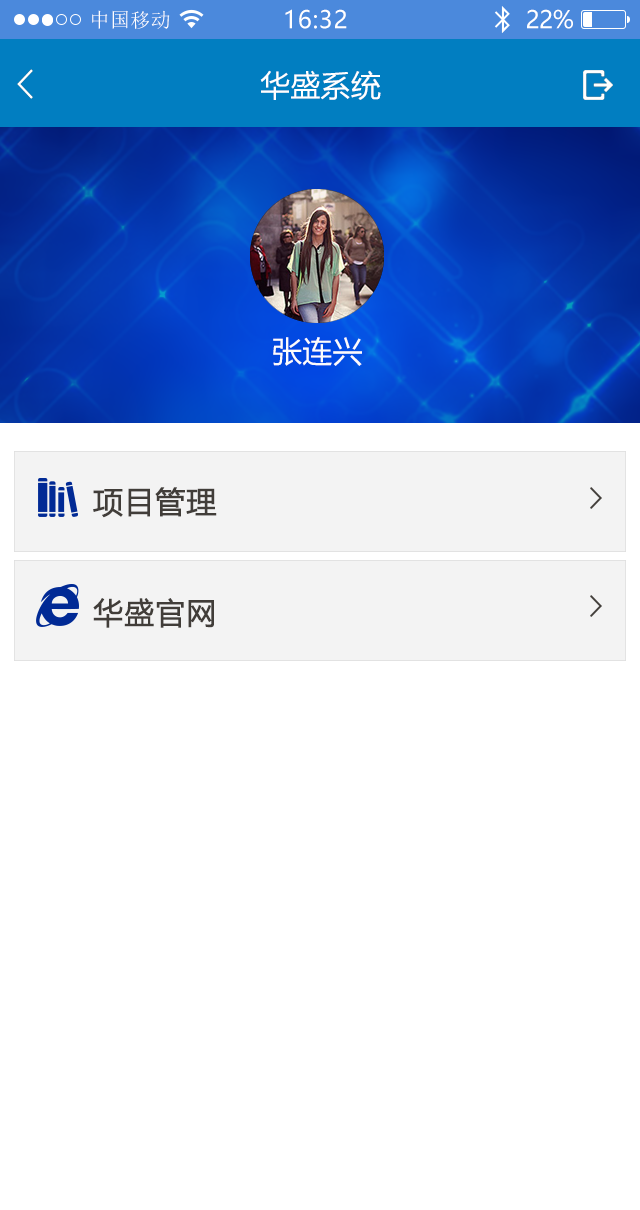
<style>
.page{position:relative;width:640px;height:1210px;background:#ffffff}
.page>*{position:absolute;margin:0}
.t1{font:20px "SimSun";letter-spacing:0.02em;color:#ffffff}
.t2{font:24px "MicrosoftYaHei";letter-spacing:0.025em;color:#ffffff}
.t3{font:24px "MicrosoftYaHei";letter-spacing:-0.02em;color:#ffffff}
.t4{font:30px "MicrosoftYaHei";letter-spacing:0.01em;color:#ffffff}
.t5{font:30px "MicrosoftYaHei";letter-spacing:0.01em;color:#fcfcfc}
.t6{font:30px "MicrosoftYaHei";letter-spacing:0.01em;color:#413d39;font-weight:bold}
</style>
<div class="page">
<p class="t1" style="left:92px;top:10px;width:78px;height:19px">中国移动</p>
<p class="t2" style="left:285px;top:9px;width:62px;height:20px">16:32</p>
<p class="t3" style="left:527px;top:9px;width:46px;height:20px">22%</p>
<p class="t4" style="left:260px;top:70px;width:121px;height:30px">华盛系统</p>
<p class="t5" style="left:273px;top:337px;width:89px;height:29px">张连兴</p>
<p class="t6" style="left:93px;top:487px;width:124px;height:31px">项目管理</p>
<p class="t6" style="left:93px;top:598px;width:121px;height:30px">华盛官网</p>
</div>
